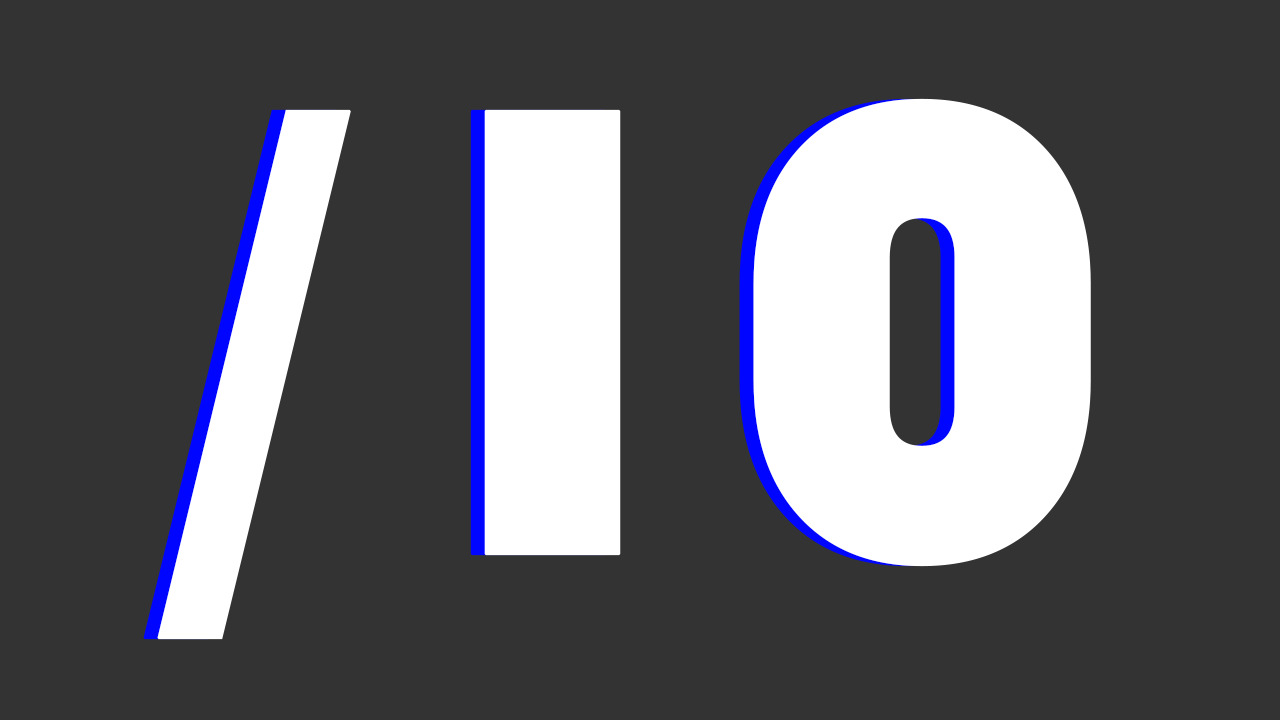
<style>
.page{position:relative;width:1280px;height:720px;background:#333333}
.page>*{position:absolute;margin:0}
.t1{font:159.5px "Bauhaus93";letter-spacing:-0.07em;color:#ffffff;font-weight:bold;scale:1.06 1}
</style>
<div class="page">
<p class="t1" style="left:157px;top:98px;width:934px;height:542px;text-align:center">/10</p>
</div>
